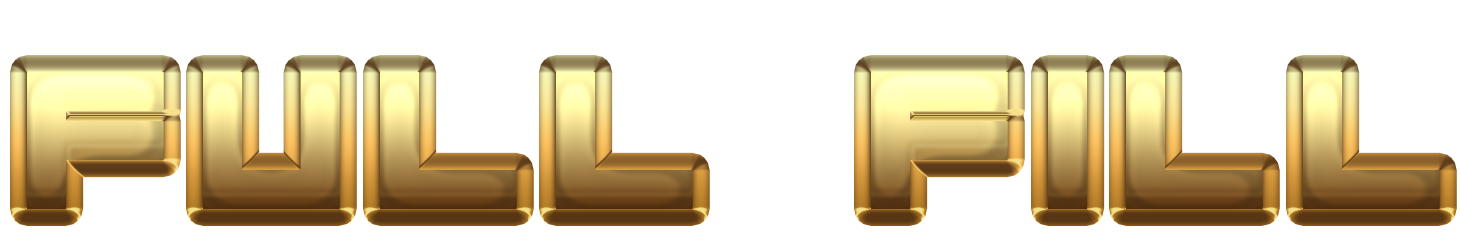
<style>
.page{position:relative;width:1461px;height:238px;background:#ffffff}
.page>*{position:absolute;margin:0}
.t1{font:200px "Diagon";letter-spacing:0.15em}
</style>
<div class="page">
<p class="t1" style="left:27px;top:72px;width:1413px;height:137px">FULL  FILL</p>
</div>
